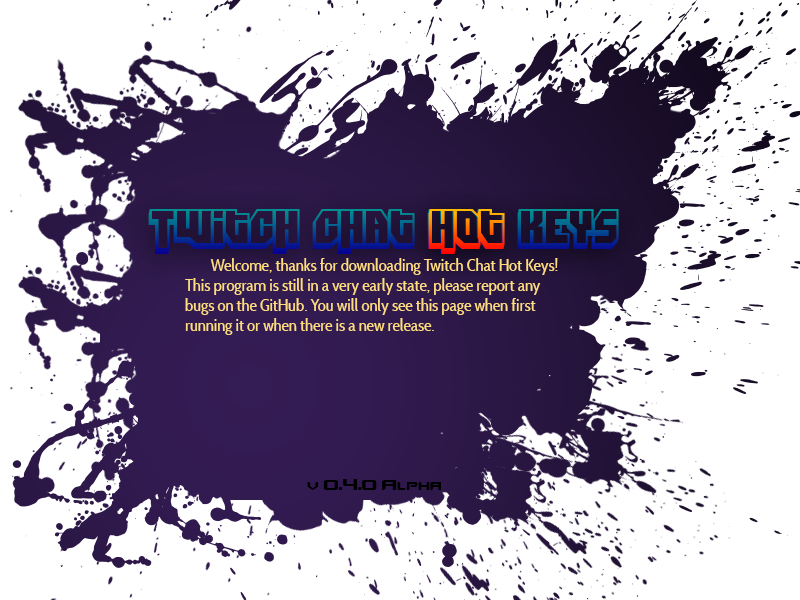
<style>
.page{position:relative;width:800px;height:600px;background:#ffffff}
.page>*{position:absolute;margin:0}
.t1{font:45.8px "DimitriSwank"}
.t2{font:16.7px "CabinCondensed";color:#ffdc82}
.t3{font:20.8px "Counter-StrikeRegular";color:#000000}
</style>
<div class="page">
<p class="t1" style="left:148px;top:209px;width:471px;height:45px">Twitch chat Hot Keys</p>
<p class="t1" style="left:428px;top:209px;width:77px;height:45px">Hot</p>
<p class="t2" style="left:185px;top:258px;width:373px;height:77px">Welcome, thanks for downloading Twitch Chat Hot Keys!<br>This program is still in a very early state, please report any<br>bugs on the GitHub. You will only see this page when first<br>running it or when there is a new release.</p>
<p class="t3" style="left:307px;top:479px;width:134px;height:11px">v 0.4.0 Alpha</p>
</div>
